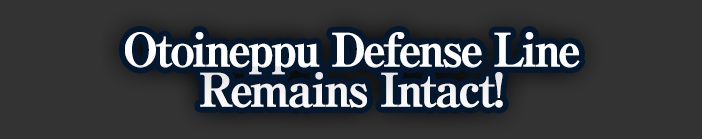
<style>
.page{position:relative;width:702px;height:139px;background:#333333}
.page>*{position:absolute;margin:0}
.t1{font:46px/40px "RyuminPro-ExBold";letter-spacing:-0.08em;color:#ffffff;font-weight:bold}
</style>
<div class="page">
<p class="t1" style="left:125px;top:32px;width:455px;height:76px;text-align:center">Otoineppu Defense Line<br>Remains Intact!</p>
</div>
